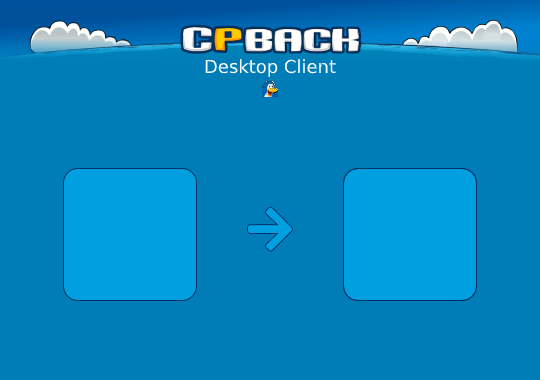
<style>
.page{position:relative;width:540px;height:380px;background:#007db7}
.page>*{position:absolute;margin:0}
.t1{font:18px "DejaVuSans";color:#ffffff}
</style>
<div class="page">
<p class="t1" style="left:205px;top:59px;width:131px;height:18px">Desktop Client</p>
</div>
